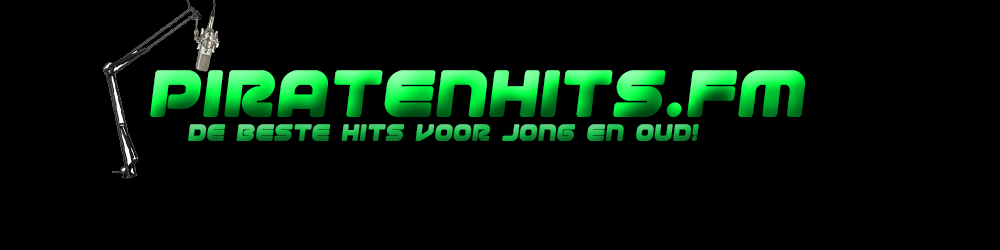
<style>
.page{position:relative;width:1000px;height:250px;background:#000000}
.page>*{position:absolute;margin:0}
.t1{font:80.8px "1stEnterprisesSemi-Italic"}
.t2{font:28.8px "1stEnterprisesSemi-Italic"}
</style>
<div class="page">
<p class="t1" style="left:150px;top:70px;width:656px;height:47px">PiratenHits.Fm</p>
<p class="t2" style="left:188px;top:124px;width:511px;height:17px">de beste hits voor jong en oud!</p>
</div>
